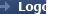
<style>
.page{position:relative;width:64px;height:14px;background:#ffffff}
.page>*{position:absolute;margin:0}
.t1{font:13px "Tahoma-Bold";color:#ffffff}
</style>
<div class="page">
<p class="t1" style="left:19px;top:2px;width:45px;height:12px">Logout</p>
</div>
